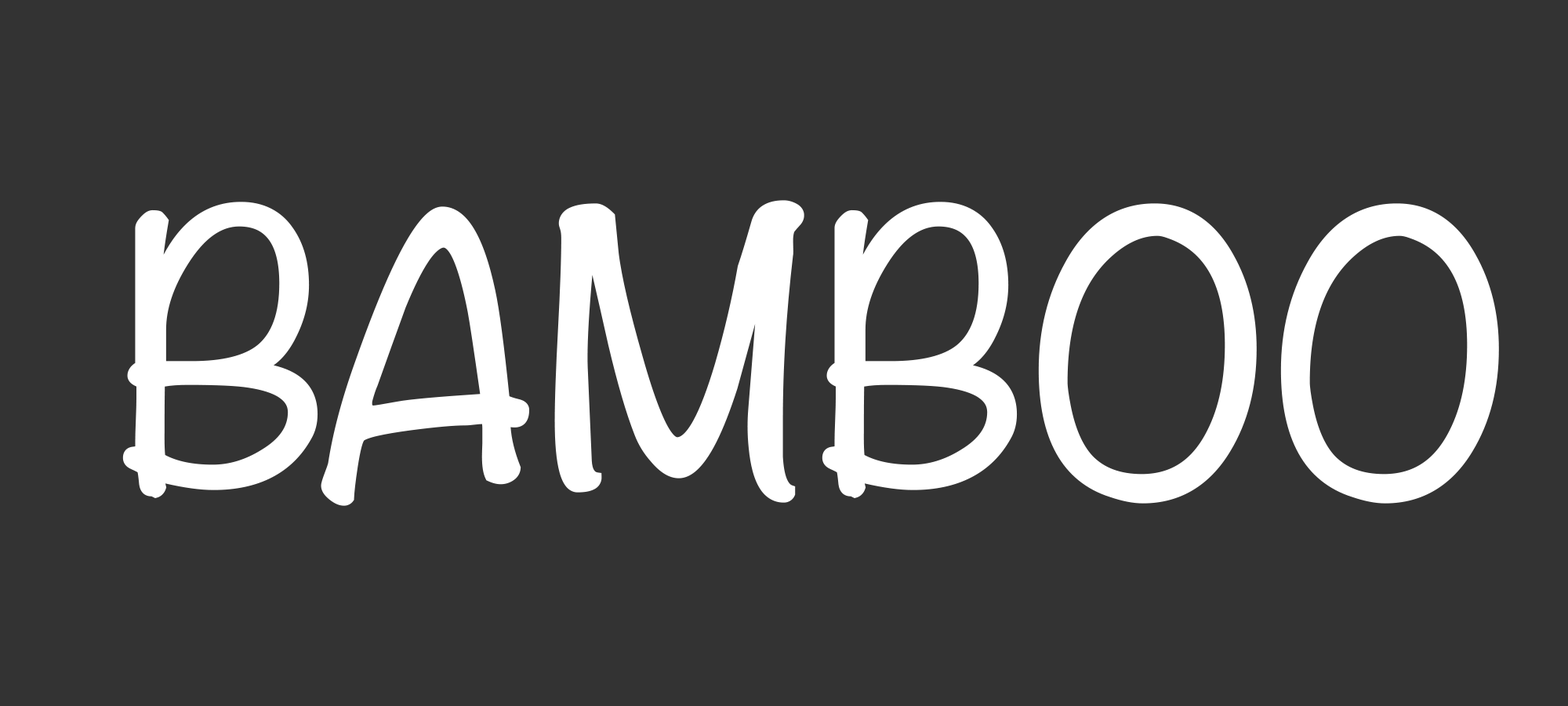
<style>
.page{position:relative;width:1568px;height:706px;background:#333333}
.page>*{position:absolute;margin:0}
.t1{font:326.7px "Noteworthy-Light";color:#ffffff;font-weight:bold}
</style>
<div class="page">
<p class="t1" style="left:122px;top:200px;width:1377px;height:306px">BAMBOO</p>
</div>
